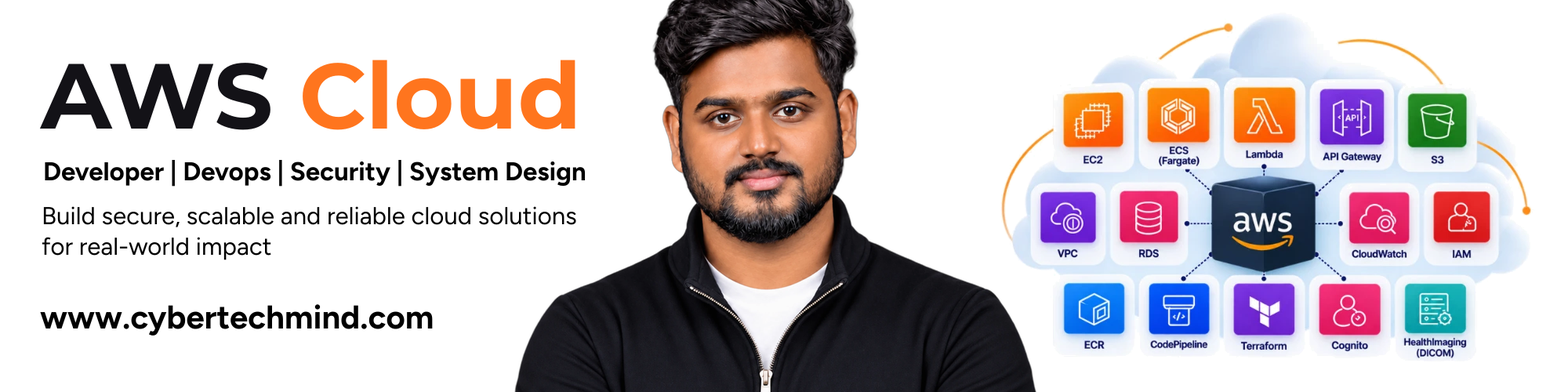
<style>
.page{position:relative;width:1568px;height:392px;background:#ffffff}
.page>*{position:absolute;margin:0}
.t1{font:92.4px "Montserrat-Bold";color:#ff751e}
.t2{font:92.4px "Montserrat-Bold";color:#131217}
.t3{font:25.8px "Figtree-Bold";color:#000000}
.t4{font:24.5px/30.6px "Figtree-Regular";color:#000000}
.t5{font:32.8px "Figtree-Bold";color:#000000}
</style>
<div class="page">
<p class="t1" style="left:39px;top:56px;width:540px;height:77px"><span class="t2">AWS </span>Cloud</p>
<p class="t3" style="left:38px;top:157px;width:551px;height:33px">Developer | Devops | Security | System Design</p>
<p class="t4" style="left:37px;top:203px;width:543px;height:60px">Build secure, scalable and reliable cloud solutions<br>for real-world impact</p>
<p class="t5" style="left:37px;top:301px;width:399px;height:38px">www.cybertechmind.com</p>
</div>
